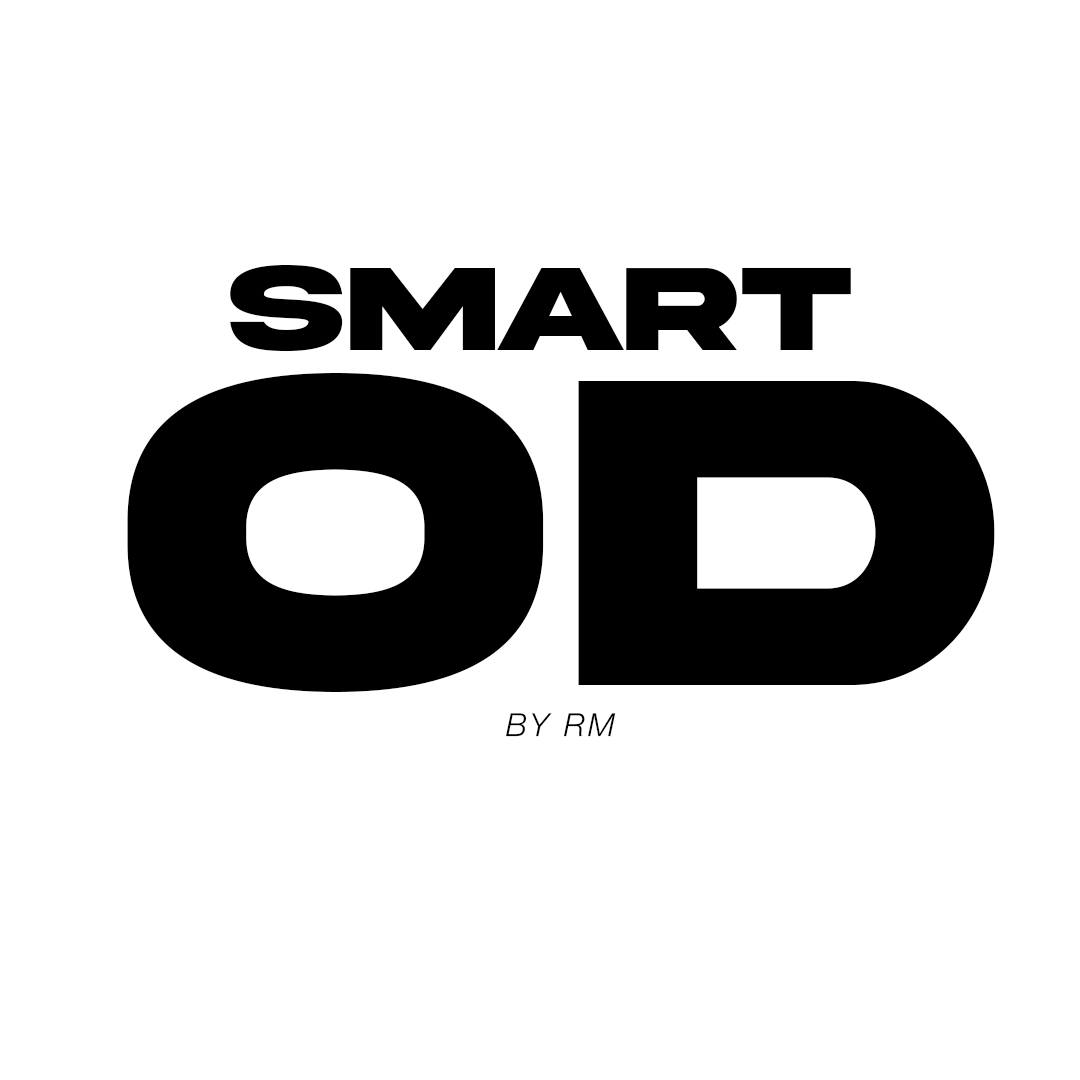
<style>
.page{position:relative;width:1080px;height:1080px;background:#ffffff}
.page>*{position:absolute;margin:0}
.t1{font:125.6px "AkiraExpanded-SuperBold";color:#000000;text-transform:uppercase}
.t2{font:463.8px "AkiraExpanded-SuperBold";color:#000000;text-transform:uppercase}
.t3{font:31.8px "HelveticaNeue-LightItalic";letter-spacing:0.1em;color:#000000;text-transform:uppercase}
</style>
<div class="page">
<p class="t1" style="left:230px;top:264px;width:621px;height:88px">SMART</p>
<p class="t2" style="left:127px;top:373px;width:868px;height:319px">OD</p>
<p class="t3" style="left:506px;top:713px;width:110px;height:24px">by rm</p>
</div>
